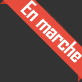
<style>
.page{position:relative;width:82px;height:82px;background:#333333}
.page>*{position:absolute;margin:0}
.t1{font:20.9px "AgencyFB-Bold";letter-spacing:0.001em;color:#ffffff}
</style>
<div class="page">
<p class="t1" style="left:20px;top:0px;width:62px;height:63px;rotate:44deg">En marche</p>
</div>
